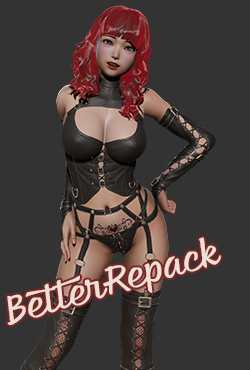
<style>
.page{position:relative;width:250px;height:370px;background:#333333}
.page>*{position:absolute;margin:0}
.t1{font:37.8px "Feltro-Eroded";color:#ebe2d7}
</style>
<div class="page">
<p class="t1" style="left:7px;top:237px;width:214px;height:88px;rotate:-16deg">BetterRepack</p>
</div>
